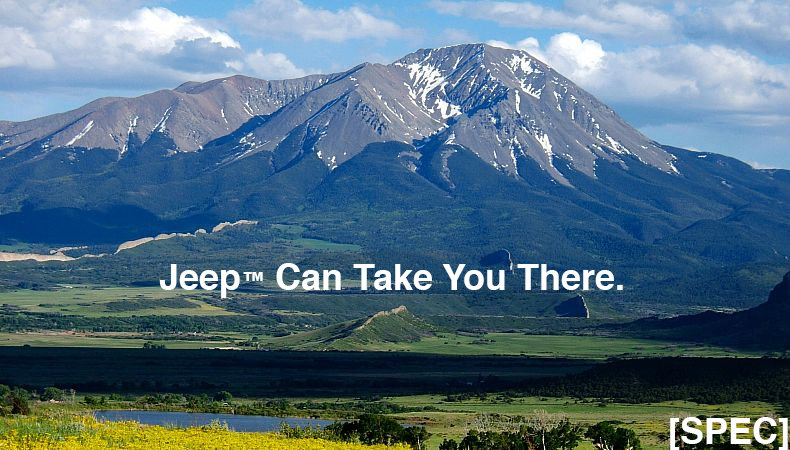
<style>
.page{position:relative;width:790px;height:450px}
.page>*{position:absolute;margin:0}
.t1{font:36px "Helvetica-Bold";color:#ffffff}
.t2{font:24px "Helvetica-Bold";color:#ffffff}
</style>
<div class="page">
<p class="t1" style="left:159px;top:263px;width:464px;height:35px">Jeep<span class="t2">™</span> Can Take You There.</p>
<p class="t1" style="left:670px;top:417px;width:118px;height:34px">[SPEC]</p>
</div>
